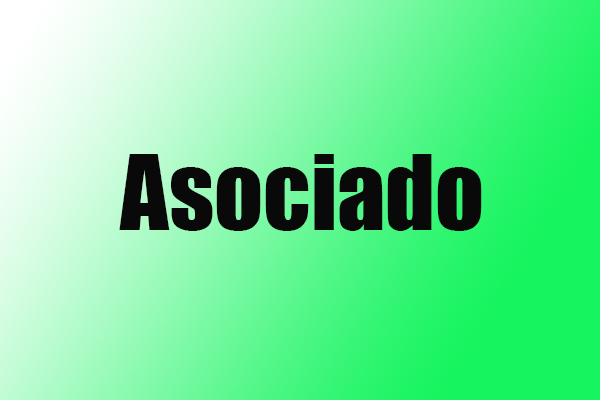
<style>
.page{position:relative;width:600px;height:400px}
.page>*{position:absolute;margin:0}
.t1{font:96px "Impact";color:#090909}
</style>
<div class="page">
<p class="t1" style="left:119px;top:154px;width:363px;height:77px">Asociado</p>
</div>
